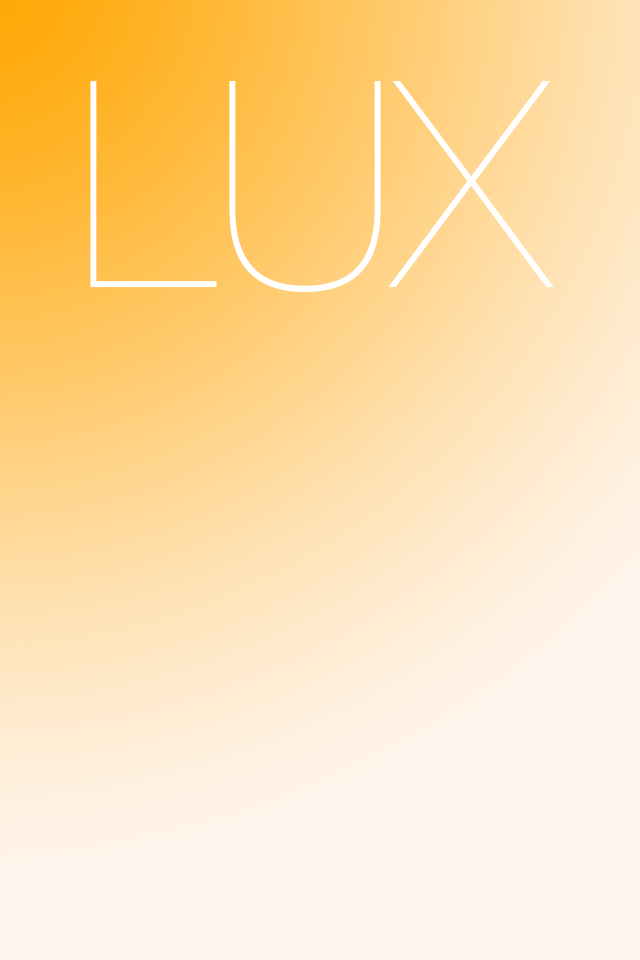
<style>
.page{position:relative;width:640px;height:960px}
.page>*{position:absolute;margin:0}
.t1{font:288px "HelveticaNeue-UltraLight";color:#ffffff}
</style>
<div class="page">
<p class="t1" style="left:90px;top:81px;width:464px;height:211px">LUX</p>
</div>
